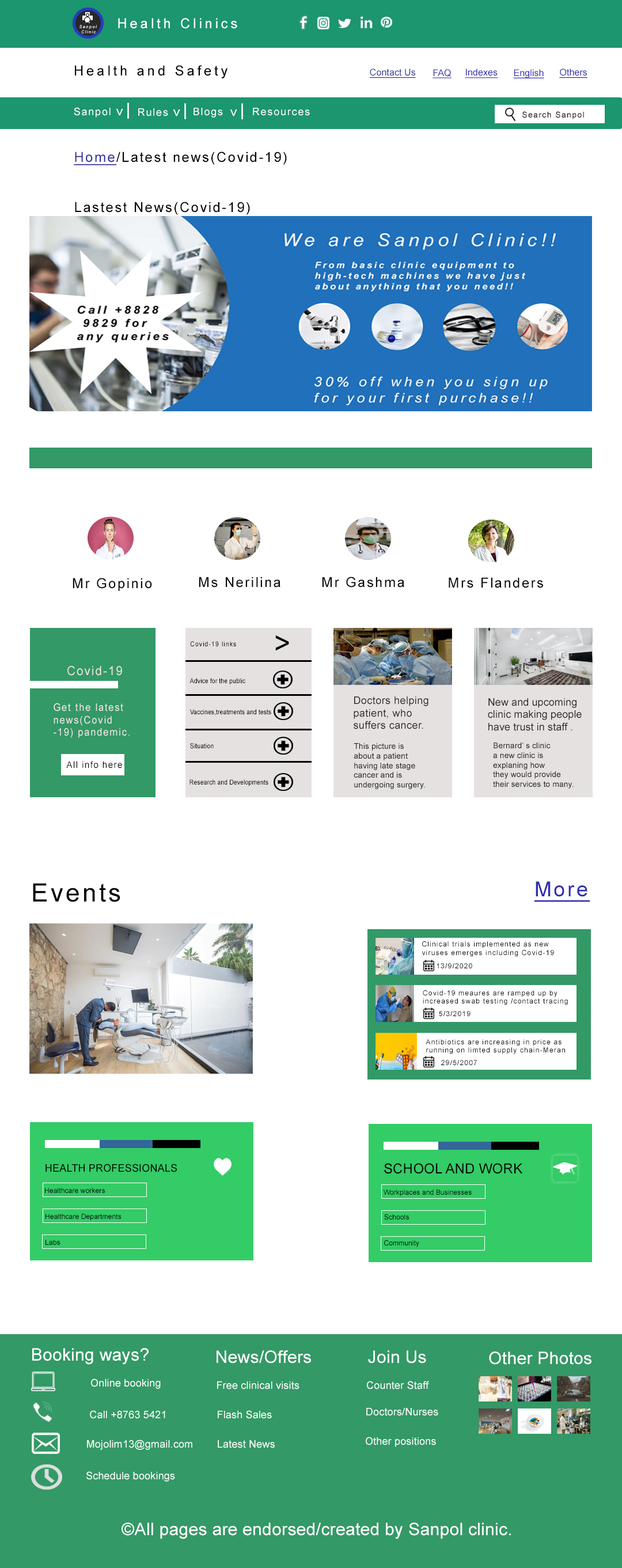
<style>
.page{position:relative;width:622px;height:1568px;background:#ffffff}
.page>*{position:absolute;margin:0}
.t1{font:13.8px "ArialMT";letter-spacing:0.2em;color:#ffffff}
.t2{font:4.4px "Arial-ItalicMT";letter-spacing:0.2em;scale:0.97 1}
.t3{font:13.8px "ArialMT";letter-spacing:0.2em;color:#000000}
.t4{font:9.2px "ArialMT";letter-spacing:0.005em;color:#333399;text-decoration:underline}
.t5{font:9.2px "ArialMT";letter-spacing:0.005em;color:#312eae;text-decoration:underline}
.t6{font:10.4px "ArialMT";letter-spacing:0.1em;color:#ffffff}
.t7{font:13.8px "Arial-ItalicMT";letter-spacing:0.2em;color:#ffffff}
.t8{font:17.3px "Arial-ItalicMT";letter-spacing:0.2em;color:#ffffff}
.t9{font:8.1px "ArialMT";letter-spacing:0.1em;color:#000000}
.t10{font:13.8px "ArialMT";letter-spacing:0.1em;color:#000000}
.t11{font:13.8px "ArialMT";letter-spacing:0.1em;color:#333399;text-decoration:underline}
.t12{font:13.8px "ArialMT";letter-spacing:0.1em;color:#0b0a0a}
.t13{font:6.8px "ArialMT";letter-spacing:0.1em;color:#000000;scale:0.89 1}
.t14{font:32.4px "ArialMT";letter-spacing:0.1em;color:#000000;scale:0.86 1}
.t15{font:12.7px "ArialMT";letter-spacing:0.1em;color:#e9e4e4;scale:0.93 1}
.t16{font:6.8px "ArialMT";letter-spacing:0.005em;color:#000000;scale:0.89 1}
.t17{font:10.4px "ArialMT";letter-spacing:0.025em;color:#2c2828}
.t18{font:10.4px "ArialMT";letter-spacing:0.005em;color:#2c2828}
.t19{font:10.4px "ArialMT";letter-spacing:0.1em;color:#e9e4e4;scale:0.93 1}
.t20{font:6.8px "ArialMT";letter-spacing:0.003em;color:#000000;scale:0.89 1}
.t21{font:8.1px "ArialMT";letter-spacing:0.005em;color:#2c2828}
.t22{font:9.2px "ArialMT";letter-spacing:0.1em;color:#000000;scale:0.93 1}
.t23{font:20.7px "ArialMT";letter-spacing:0.1em;color:#312eae;text-decoration:underline}
.t24{font:25.3px "ArialMT";letter-spacing:0.1em;color:#000000}
.t25{font:6.9px "ArialMT";letter-spacing:0.1em;color:#000000}
.t26{font:10.4px "ArialMT";letter-spacing:0.01em;color:#000000}
.t27{font:13.8px "ArialMT";letter-spacing:0.01em;color:#000000}
.t28{font:6.9px "ArialMT";letter-spacing:0.01em;color:#000000}
.t29{font:17.3px "ArialMT";letter-spacing:0.01em;color:#ffffff}
.t30{font:10.4px "ArialMT";letter-spacing:0.01em;color:#ffffff}
</style>
<div class="page">
<p class="t1" style="left:118px;top:18px;width:119px;height:11px">Health Clinics</p>
<p class="t2" style="left:79px;top:25px;width:18px;height:8px">Sanpol<br> Clinic</p>
<p class="t3" style="left:75px;top:65px;width:153px;height:13px">Health and Safety</p>
<p class="t4" style="left:369px;top:69px;width:47px;height:9px">Contact Us</p>
<p class="t5" style="left:433px;top:69px;width:19px;height:9px">FAQ</p>
<p class="t5" style="left:465px;top:69px;width:33px;height:9px">Indexes</p>
<p class="t5" style="left:513px;top:69px;width:31px;height:9px">English</p>
<p class="t5" style="left:559px;top:69px;width:29px;height:9px">Others</p>
<p class="t6" style="left:74px;top:107px;width:37px;height:11px">Sanpol</p>
<p class="t7" style="left:116px;top:109px;width:7px;height:7px;rotate:90deg">&gt;</p>
<p class="t8" style="left:127px;top:103px;width:2px;height:16px">|</p>
<p class="t6" style="left:138px;top:108px;width:30px;height:8px">Rules</p>
<p class="t7" style="left:173px;top:109px;width:7px;height:7px;rotate:90deg">&gt;</p>
<p class="t8" style="left:184px;top:103px;width:2px;height:16px">|</p>
<p class="t6" style="left:194px;top:108px;width:29px;height:10px">Blogs</p>
<p class="t7" style="left:230px;top:109px;width:7px;height:7px;rotate:90deg">&gt;</p>
<p class="t8" style="left:241px;top:103px;width:2px;height:16px">|</p>
<p class="t6" style="left:253px;top:108px;width:57px;height:8px">Resources</p>
<p class="t9" style="left:522px;top:111px;width:62px;height:8px">Search Sanpol</p>
<p class="t10" style="left:74px;top:152px;width:213px;height:13px"><span class="t11">Home</span>/Latest news(Covid-19)</p>
<p class="t10" style="left:75px;top:202px;width:175px;height:13px">Lastest News(Covid-19)</p>
<p class="t12" style="left:73px;top:578px;width:79px;height:13px">Mr Gopinio</p>
<p class="t12" style="left:199px;top:577px;width:82px;height:11px">Ms Nerilina</p>
<p class="t12" style="left:322px;top:577px;width:82px;height:11px">Mr Gashma</p>
<p class="t12" style="left:449px;top:577px;width:94px;height:11px">Mrs Flanders</p>
<p class="t13" style="left:190px;top:641px;width:46px;height:6px">Covid-19 links</p>
<p class="t14" style="left:275px;top:635px;width:14px;height:16px">&gt;</p>
<p class="t15" style="left:67px;top:666px;width:55px;height:10px">Covid-19</p>
<p class="t16" style="left:190px;top:678px;width:55px;height:7px">Advice for the public</p>
<p class="t17" style="left:354px;top:696px;width:75px;height:33px">Doctors helping<br>patient, who <br>suffers cancer.</p>
<p class="t18" style="left:488px;top:698px;width:94px;height:33px">New and upcoming <br>clinic making people <br>have trust in staff .</p>
<p class="t19" style="left:54px;top:703px;width:76px;height:35px">Get the latest<br>news(Covid<br>-19) pandemic.</p>
<p class="t20" style="left:190px;top:709px;width:81px;height:6px">Vaccines,treatments and tests</p>
<p class="t16" style="left:190px;top:743px;width:24px;height:6px">Situation</p>
<p class="t21" style="left:354px;top:743px;width:71px;height:46px">This picture is <br>about a patient <br>having late stage <br>cancer and is <br>undergoing surgery.</p>
<p class="t21" style="left:493px;top:743px;width:81px;height:46px">Bernard’ s clinic <br>a new clinic is<br>explaning how <br>they would provide <br>their services to many.</p>
<p class="t22" style="left:66px;top:761px;width:56px;height:7px">All info here</p>
<p class="t16" style="left:190px;top:779px;width:78px;height:7px">Research and Developments</p>
<p class="t23" style="left:534px;top:881px;width:56px;height:21px">More</p>
<p class="t24" style="left:33px;top:883px;width:87px;height:19px">Events</p>
<p class="t25" style="left:422px;top:941px;width:132px;height:16px">Clinical trials implemented as new <br>viruses emerges including Covid-19</p>
<p class="t25" style="left:437px;top:963px;width:35px;height:5px">13/9/2020</p>
<p class="t25" style="left:423px;top:990px;width:145px;height:15px">Covid-19 meaures are ramped up by<br>increased swab testing /contact tracing</p>
<p class="t25" style="left:439px;top:1011px;width:32px;height:5px">5/3/2019</p>
<p class="t25" style="left:426px;top:1039px;width:139px;height:15px">Antibiotics are increasing in price as<br>running on limted supply chain-Meran</p>
<p class="t25" style="left:441px;top:1060px;width:37px;height:5px">29/5/2007</p>
<p class="t26" style="left:46px;top:1164px;width:131px;height:8px">HEALTH PROFESSIONALS</p>
<p class="t27" style="left:384px;top:1163px;width:139px;height:11px">SCHOOL AND WORK</p>
<p class="t28" style="left:45px;top:1188px;width:60px;height:5px">Healthcare workers</p>
<p class="t28" style="left:384px;top:1190px;width:88px;height:6px">Workplaces and Businesses</p>
<p class="t28" style="left:46px;top:1214px;width:76px;height:7px">Healthcare Departments</p>
<p class="t28" style="left:384px;top:1214px;width:25px;height:6px">Schools</p>
<p class="t28" style="left:46px;top:1240px;width:14px;height:5px">Labs</p>
<p class="t28" style="left:384px;top:1240px;width:35px;height:7px">Community</p>
<p class="t29" style="left:32px;top:1348px;width:117px;height:17px">Booking ways?</p>
<p class="t29" style="left:217px;top:1350px;width:94px;height:14px">News/Offers</p>
<p class="t29" style="left:368px;top:1350px;width:58px;height:14px">Join Us</p>
<p class="t29" style="left:489px;top:1351px;width:103px;height:14px">Other Photos</p>
<p class="t30" style="left:91px;top:1378px;width:70px;height:11px">Online booking</p>
<p class="t30" style="left:217px;top:1381px;width:83px;height:8px">Free clinical visits</p>
<p class="t30" style="left:367px;top:1381px;width:62px;height:8px">Counter Staff</p>
<p class="t30" style="left:366px;top:1408px;width:72px;height:8px">Doctors/Nurses</p>
<p class="t30" style="left:90px;top:1410px;width:75px;height:9px">Call +8763 5421</p>
<p class="t30" style="left:218px;top:1410px;width:54px;height:9px">Flash Sales</p>
<p class="t30" style="left:87px;top:1440px;width:105px;height:10px">Mojolim13@gmail.com</p>
<p class="t30" style="left:218px;top:1440px;width:57px;height:8px">Latest News</p>
<p class="t30" style="left:366px;top:1437px;width:70px;height:10px">Other positions</p>
<p class="t30" style="left:86px;top:1471px;width:89px;height:11px">Schedule bookings</p>
<p class="t29" style="left:122px;top:1522px;width:389px;height:17px">©All pages are endorsed/created by Sanpol clinic.</p>
</div>
